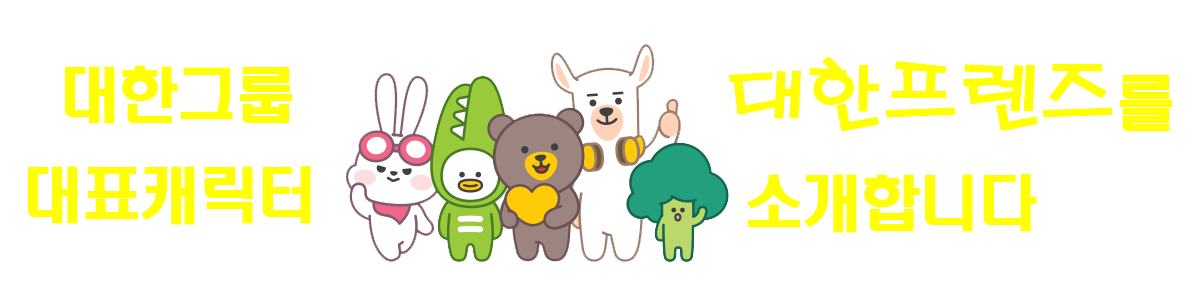
<style>
.page{position:relative;width:1200px;height:300px;background:#ffffff}
.page>*{position:absolute;margin:0}
.t1{font:60px/100px "H2hdrM";letter-spacing:-0.05em;color:#ffff01;font-weight:bold}
.t2{font:80px/100px "H2porM";letter-spacing:-0.05em;color:#ffff01;font-weight:bold}
</style>
<div class="page">
<p class="t1" style="left:28px;top:65px;width:283px;height:160px">대한그룹<br>대표캐릭터</p>
<p class="t1" style="left:728px;top:57px;width:445px;height:176px"><span class="t2">대한프렌즈</span>를<br> 소개합니다</p>
</div>
